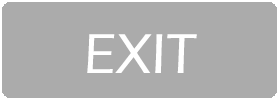
<style>
.page{position:relative;width:280px;height:100px;background:#ababab}
.page>*{position:absolute;margin:0}
.t1{font:58.3px "ErasITC-Medium";color:#ffffff}
</style>
<div class="page">
<p class="t1" style="left:87px;top:34px;width:110px;height:39px">EXIT</p>
</div>
